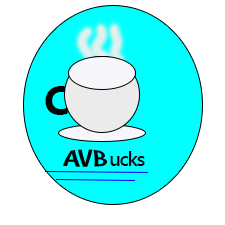
<style>
.page{position:relative;width:225px;height:225px;background:#ffffff}
.page>*{position:absolute;margin:0}
.t1{font:40.6px "SegoeUI-Bold";letter-spacing:-0.075em;color:#040404}
.t2{font:20.3px "SegoeUI-Bold";letter-spacing:-0.075em;color:#040404}
.t3{font:20.3px "SegoeUI-Semibold";letter-spacing:-0.075em;color:#040404}
</style>
<div class="page">
<p class="t1" style="left:45px;top:86px;width:23px;height:29px">C</p>
<p class="t2" style="left:62px;top:149px;width:46px;height:18px">AVB</p>
<p class="t3" style="left:110px;top:151px;width:35px;height:15px">ucks</p>
</div>
